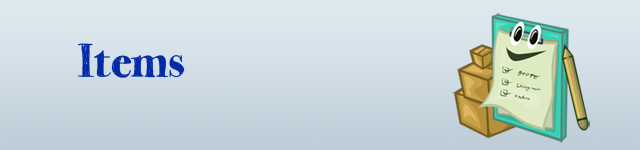
<style>
.page{position:relative;width:640px;height:150px}
.page>*{position:absolute;margin:0}
.t1{font:47.2px "MomsDiner";color:#0229a6}
</style>
<div class="page">
<p class="t1" style="left:77px;top:43px;width:108px;height:35px">Items</p>
</div>
